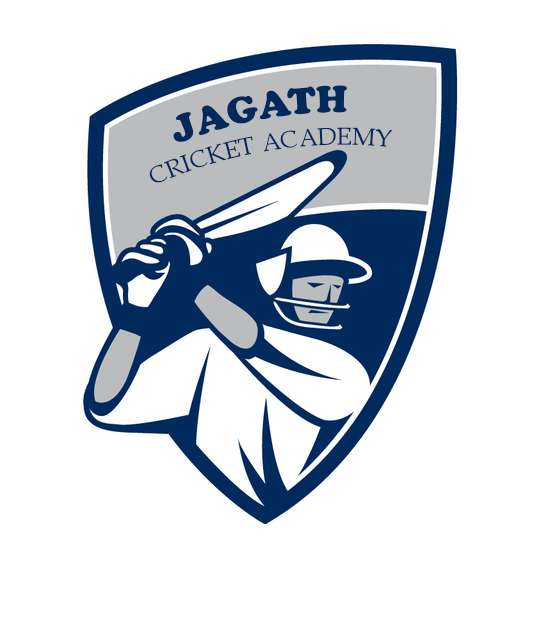
<style>
.page{position:relative;width:539px;height:640px;background:#ffffff}
.page>*{position:absolute;margin:0}
.t1{font:36px "CooperBlackStd";color:#01295c}
.t2{font:24px "BookAntiqua";color:#01295c}
</style>
<div class="page">
<p class="t1" style="left:173px;top:85px;width:174px;height:57px;rotate:-11deg">JAGATH</p>
<p class="t2" style="left:149px;top:127px;width:244px;height:56px;rotate:-9deg">CRICKET ACADEMY</p>
</div>
